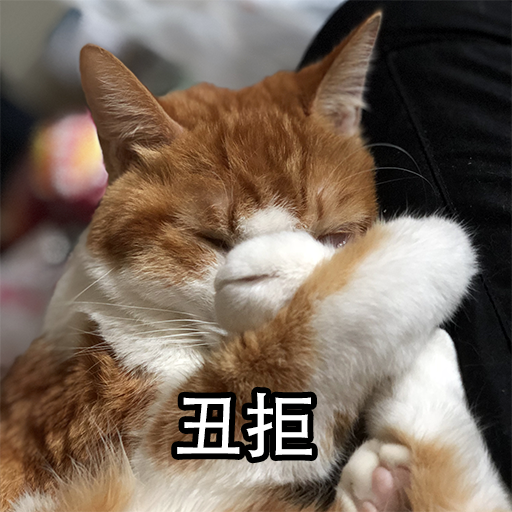
<style>
.page{position:relative;width:512px;height:512px}
.page>*{position:absolute;margin:0}
.t1{font:72px "AdobeHeitiStd-Regular";color:#ffffff}
</style>
<div class="page">
<p class="t1" style="left:177px;top:392px;width:135px;height:66px">丑拒</p>
</div>
